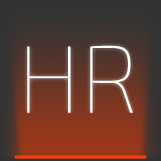
<style>
.page{position:relative;width:161px;height:161px}
.page>*{position:absolute;margin:0}
.t1{font:96px "Exo2-Thin";color:#ffffff}
</style>
<div class="page">
<p class="t1" style="left:27px;top:45px;width:106px;height:68px">HR</p>
</div>
